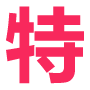
<style>
.page{position:relative;width:90px;height:90px;background:#ffffff}
.page>*{position:absolute;margin:0}
.t1{font:80px "MicrosoftYaHei-Bold";letter-spacing:0.1em;color:#f8285c}
</style>
<div class="page">
<p class="t1" style="left:6px;top:6px;width:78px;height:78px">特</p>
</div>
